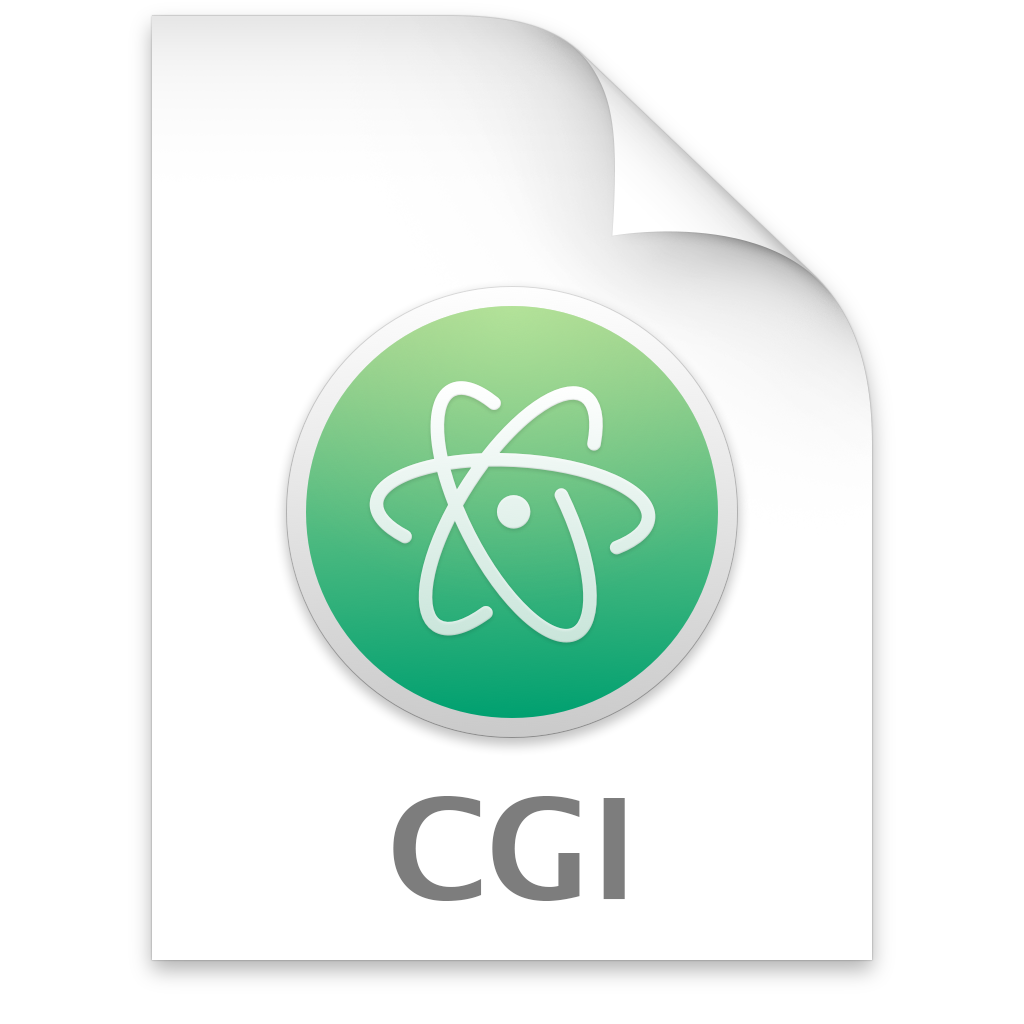
<style>
.page{position:relative;width:1024px;height:1024px;background:#ffffff}
.page>*{position:absolute;margin:0}
.t1{font:140px "LucidaGrande-Bold";color:#7d7d7d}
</style>
<div class="page">
<p class="t1" style="left:393px;top:796px;width:232px;height:105px">CGI</p>
</div>
